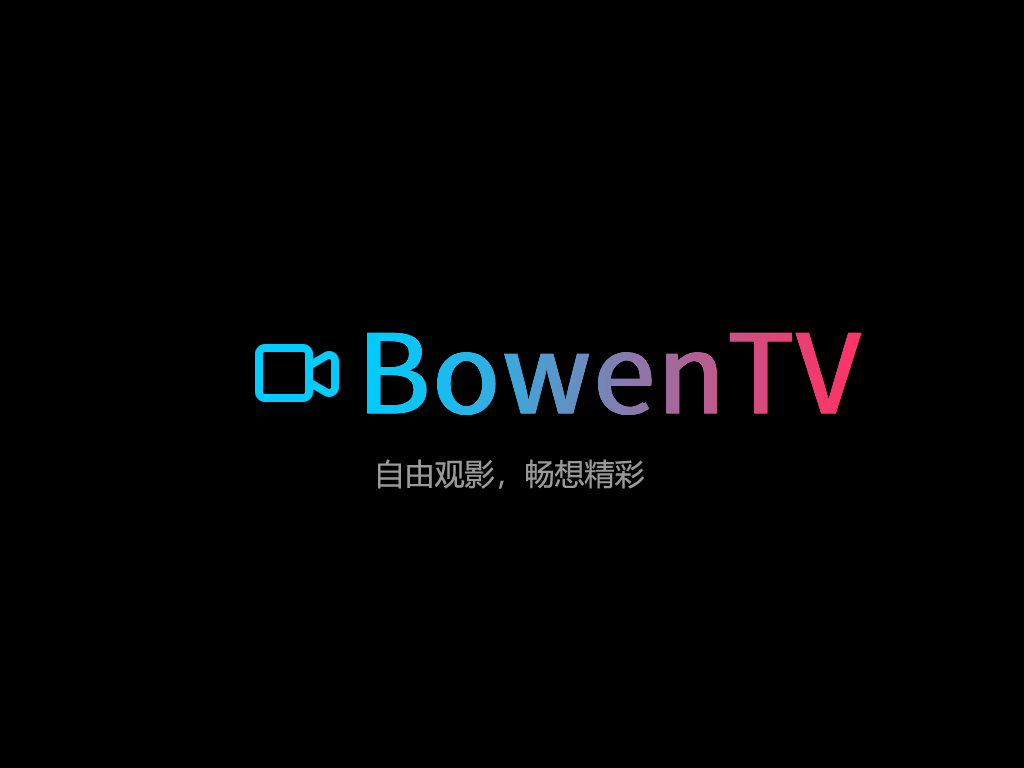
<style>
.page{position:relative;width:1024px;height:768px;background:#000000}
.page>*{position:absolute;margin:0}
.t1{font:110px "MicrosoftYaHei";font-weight:bold}
.t2{font:30px "MicrosoftYaHei";color:#999999}
</style>
<div class="page">
<p class="t1" style="left:367px;top:332px;width:495px;height:83px">BowenTV</p>
<p class="t2" style="left:378px;top:459px;width:266px;height:30px">自由观影，畅想精彩</p>
</div>
